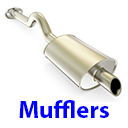
<style>
.page{position:relative;width:128px;height:128px;background:#ffffff}
.page>*{position:absolute;margin:0}
.t1{font:25px "MyriadPro-Bold";color:#0000ff}
</style>
<div class="page">
<p class="t1" style="left:19px;top:100px;width:90px;height:18px">Mufflers</p>
</div>
